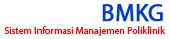
<style>
.page{position:relative;width:170px;height:39px;background:#ffffff}
.page>*{position:absolute;margin:0}
.t1{font:24px "MyriadPro-Regular";color:#ffffff;font-weight:bold}
.t2{font:24px "MyriadPro-Regular";color:#043dc9;font-weight:bold}
.t3{font:10px "MyriadPro-Regular";color:#ff0000}
</style>
<div class="page">
<p class="t1" style="left:5px;top:4px;width:158px;height:18px">SI-MPOK <span class="t2">BMKG</span></p>
<p class="t3" style="left:4px;top:26px;width:161px;height:10px">Sistem Informasi Manajemen Poliklinik</p>
</div>
